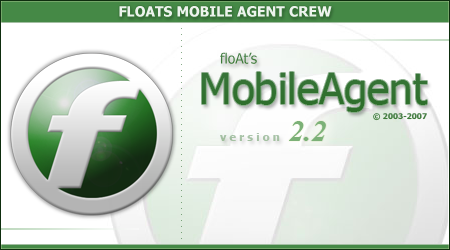
<style>
.page{position:relative;width:450px;height:250px;background:#ffffff}
.page>*{position:absolute;margin:0}
.t1{font:14px "Tahoma-Bold";color:#ffffff}
.t2{font:6px "Tahoma"}
.t3{font:14px "Tahoma";color:#427d3f}
.t4{font:42px "Tahoma";color:#206421}
.t5{font:8px "Tahoma-Bold";color:#447e42}
.t6{font:30px "TimesNewRomanPS-BoldItalicMT";color:#7bb975}
.t7{font:11px "Tahoma-Bold";color:#a7c2a5}
</style>
<div class="page">
<p class="t1" style="left:119px;top:6px;width:213px;height:11px;opacity:0.9">FLOATS MOBILE AGENT CREW</p>
<p class="t2" style="left:181px;top:28px;width:1px;height:211px">....................................</p>
<p class="t3" style="left:220px;top:52px;width:37px;height:12px">floAt’s</p>
<p class="t4" style="left:202px;top:72px;width:225px;height:40px">MobileAgent</p>
<p class="t5" style="left:373px;top:113px;width:54px;height:8px">© 2003-2007</p>
<p class="t6" style="left:289px;top:121px;width:37px;height:20px">2.2</p>
<p class="t7" style="left:220px;top:133px;width:60px;height:8px">v e r s i o n</p>
</div>
